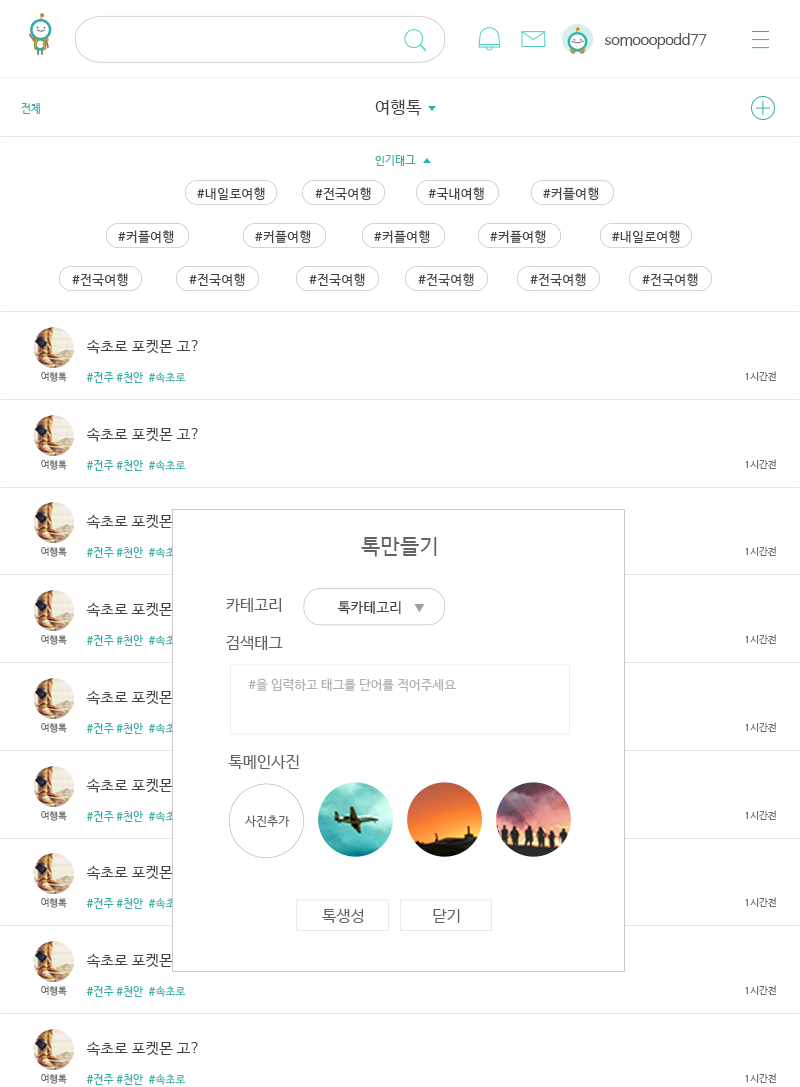
<style>
.page{position:relative;width:800px;height:1087px;background:#ffffff}
.page>*{position:absolute;margin:0}
.t1{font:14.8px "NanumBarunGothic";letter-spacing:-0.025em;color:#58595b}
.t2{font:17px "NanumBarunGothic";letter-spacing:0.025em;color:#434343}
.t3{font:11px "NanumBarunGothic";letter-spacing:0.025em;color:#36ada4}
.t4{font:13.1px "NanumBarunGothic";letter-spacing:0.025em;color:#434343}
.t5{font:15px "NanumBarunGothic";letter-spacing:0.025em;color:#434343}
.t6{font:9.6px "NanumBarunGothic";letter-spacing:0.025em;color:#707070}
.t7{font:21.2px "NanumBarunGothic";letter-spacing:0.025em;color:#626262}
.t8{font:15.6px "NanumBarunGothic";letter-spacing:0.025em;color:#626262}
.t9{font:14.2px "NanumBarunGothic";letter-spacing:0.025em;color:#434343}
.t10{font:12.7px "NanumBarunGothic";letter-spacing:0.025em;color:#b4b0b0}
.t11{font:12px "NanumBarunGothic";letter-spacing:0.025em;color:#626262}
</style>
<div class="page">
<p class="t1" style="left:605px;top:33px;width:102px;height:16px">somooopodd77</p>
<p class="t2" style="left:375px;top:99px;width:47px;height:17px">여행톡</p>
<p class="t3" style="left:21px;top:103px;width:19px;height:11px">전체</p>
<p class="t3" style="left:375px;top:155px;width:40px;height:11px">인기태그</p>
<p class="t3" style="left:375px;top:155px;width:40px;height:11px">인기태그</p>
<p class="t4" style="left:197px;top:187px;width:68px;height:14px">#내일로여행</p>
<p class="t4" style="left:197px;top:187px;width:68px;height:14px">#내일로여행</p>
<p class="t4" style="left:315px;top:187px;width:56px;height:14px">#전국여행</p>
<p class="t4" style="left:315px;top:187px;width:56px;height:14px">#전국여행</p>
<p class="t4" style="left:428px;top:187px;width:56px;height:14px">#국내여행</p>
<p class="t4" style="left:428px;top:187px;width:56px;height:14px">#국내여행</p>
<p class="t4" style="left:543px;top:187px;width:56px;height:14px">#커플여행</p>
<p class="t4" style="left:543px;top:187px;width:56px;height:14px">#커플여행</p>
<p class="t4" style="left:118px;top:230px;width:56px;height:14px">#커플여행</p>
<p class="t4" style="left:255px;top:230px;width:56px;height:14px">#커플여행</p>
<p class="t4" style="left:374px;top:230px;width:56px;height:14px">#커플여행</p>
<p class="t4" style="left:490px;top:230px;width:56px;height:14px">#커플여행</p>
<p class="t4" style="left:612px;top:230px;width:68px;height:14px">#내일로여행</p>
<p class="t4" style="left:72px;top:273px;width:56px;height:14px">#전국여행</p>
<p class="t4" style="left:189px;top:273px;width:56px;height:14px">#전국여행</p>
<p class="t4" style="left:309px;top:273px;width:56px;height:14px">#전국여행</p>
<p class="t4" style="left:418px;top:273px;width:56px;height:14px">#전국여행</p>
<p class="t4" style="left:530px;top:273px;width:56px;height:14px">#전국여행</p>
<p class="t4" style="left:642px;top:273px;width:56px;height:14px">#전국여행</p>
<p class="t5" style="left:86px;top:339px;width:112px;height:15px">속초로 포켓몬 고?</p>
<p class="t6" style="left:41px;top:372px;width:26px;height:10px">여행톡</p>
<p class="t3" style="left:86px;top:372px;width:100px;height:11px">#전주 #천안  #속초로</p>
<p class="t6" style="left:745px;top:371px;width:31px;height:10px">1시간전</p>
<p class="t5" style="left:86px;top:427px;width:112px;height:15px">속초로 포켓몬 고?</p>
<p class="t6" style="left:41px;top:460px;width:26px;height:10px">여행톡</p>
<p class="t3" style="left:86px;top:460px;width:100px;height:11px">#전주 #천안  #속초로</p>
<p class="t6" style="left:745px;top:459px;width:31px;height:10px">1시간전</p>
<p class="t5" style="left:86px;top:514px;width:112px;height:15px">속초로 포켓몬 고?</p>
<p class="t7" style="left:361px;top:537px;width:76px;height:20px">톡만들기</p>
<p class="t6" style="left:41px;top:547px;width:26px;height:10px">여행톡</p>
<p class="t3" style="left:86px;top:547px;width:100px;height:11px">#전주 #천안  #속초로</p>
<p class="t6" style="left:745px;top:546px;width:31px;height:10px">1시간전</p>
<p class="t5" style="left:86px;top:602px;width:112px;height:15px">속초로 포켓몬 고?</p>
<p class="t8" style="left:226px;top:598px;width:56px;height:14px">카테고리</p>
<p class="t9" style="left:337px;top:601px;width:64px;height:14px">톡카테고리</p>
<p class="t6" style="left:41px;top:635px;width:26px;height:10px">여행톡</p>
<p class="t3" style="left:86px;top:635px;width:100px;height:11px">#전주 #천안  #속초로</p>
<p class="t8" style="left:226px;top:635px;width:57px;height:15px">검색태그</p>
<p class="t6" style="left:745px;top:634px;width:31px;height:10px">1시간전</p>
<p class="t10" style="left:248px;top:678px;width:208px;height:14px">#을 입력하고 태그를 단어를 적어주세요</p>
<p class="t5" style="left:86px;top:690px;width:112px;height:15px">속초로 포켓몬 고?</p>
<p class="t6" style="left:41px;top:723px;width:26px;height:10px">여행톡</p>
<p class="t3" style="left:86px;top:723px;width:100px;height:11px">#전주 #천안  #속초로</p>
<p class="t6" style="left:745px;top:722px;width:31px;height:10px">1시간전</p>
<p class="t8" style="left:228px;top:755px;width:71px;height:14px">톡메인사진</p>
<p class="t5" style="left:86px;top:778px;width:112px;height:15px">속초로 포켓몬 고?</p>
<p class="t6" style="left:41px;top:811px;width:26px;height:10px">여행톡</p>
<p class="t3" style="left:86px;top:811px;width:100px;height:11px">#전주 #천안  #속초로</p>
<p class="t11" style="left:245px;top:815px;width:45px;height:12px">사진추가</p>
<p class="t6" style="left:745px;top:810px;width:31px;height:10px">1시간전</p>
<p class="t5" style="left:86px;top:865px;width:112px;height:15px">속초로 포켓몬 고?</p>
<p class="t6" style="left:41px;top:898px;width:26px;height:10px">여행톡</p>
<p class="t3" style="left:86px;top:898px;width:100px;height:11px">#전주 #천안  #속초로</p>
<p class="t6" style="left:745px;top:897px;width:31px;height:10px">1시간전</p>
<p class="t8" style="left:322px;top:909px;width:42px;height:14px">톡생성</p>
<p class="t8" style="left:433px;top:909px;width:27px;height:14px">닫기</p>
<p class="t5" style="left:86px;top:953px;width:112px;height:15px">속초로 포켓몬 고?</p>
<p class="t6" style="left:41px;top:986px;width:26px;height:10px">여행톡</p>
<p class="t3" style="left:86px;top:986px;width:100px;height:11px">#전주 #천안  #속초로</p>
<p class="t6" style="left:745px;top:985px;width:31px;height:10px">1시간전</p>
<p class="t5" style="left:86px;top:1041px;width:112px;height:15px">속초로 포켓몬 고?</p>
<p class="t6" style="left:745px;top:1073px;width:31px;height:10px">1시간전</p>
<p class="t6" style="left:41px;top:1074px;width:26px;height:10px">여행톡</p>
<p class="t3" style="left:86px;top:1074px;width:100px;height:11px">#전주 #천안  #속초로</p>
</div>
